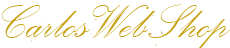
<style>
.page{position:relative;width:230px;height:48px;background:#ffffff}
.page>*{position:absolute;margin:0}
.t1{font:60.9px "PalaceScriptMT";color:#c8a416}
</style>
<div class="page">
<p class="t1" style="left:2px;top:4px;width:228px;height:46px">CarlosWebShop</p>
</div>
